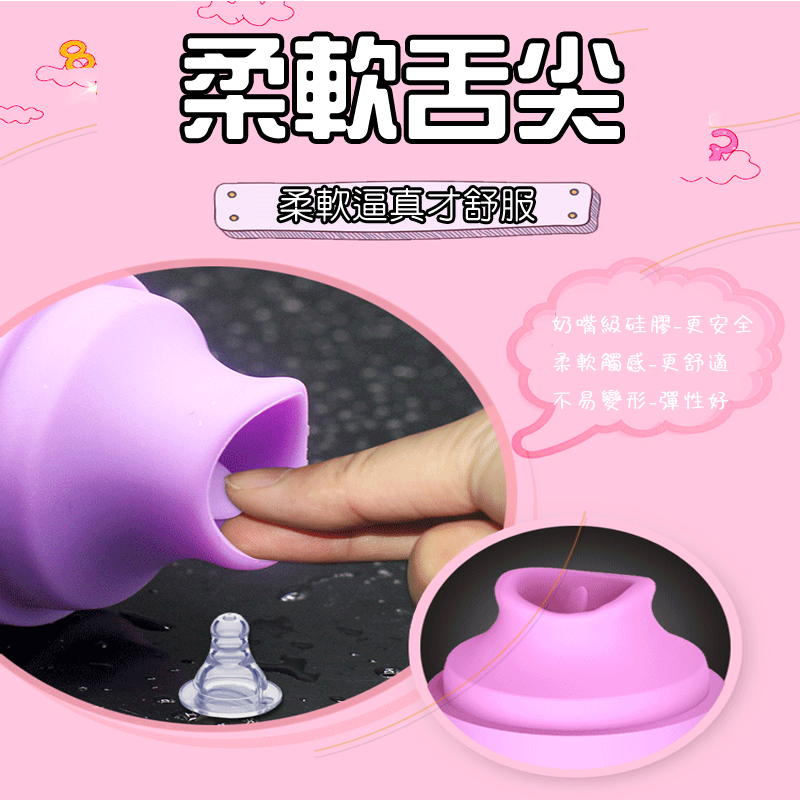
<style>
.page{position:relative;width:800px;height:800px;background:#ffc8e0}
.page>*{position:absolute;margin:0}
.t1{font:108.4px "HanWangZonYi";color:#ffffff;font-weight:bold}
.t2{font:36px "HanWangYenLight";color:#ffffff;font-weight:bold}
.t3{font:24px "DFTsai-W3-WINP-BF";color:#ffffff;font-weight:bold}
</style>
<div class="page">
<p class="t1" style="left:184px;top:36px;width:436px;height:103px">柔軟舌尖</p>
<p class="t2" style="left:279px;top:187px;width:256px;height:35px">柔軟逼真才舒服</p>
<p class="t3" style="left:551px;top:314px;width:202px;height:97px">奶嘴級硅膠-更安全<br>柔軟觸感-更舒適<br>不易變形-彈性好</p>
</div>
